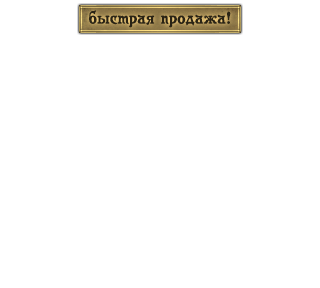
<style>
.page{position:relative;width:320px;height:288px;background:#ffffff}
.page>*{position:absolute;margin:0}
.t1{font:17px "Casanova";letter-spacing:0.01em;color:#2a2415}
</style>
<div class="page">
<p class="t1" style="left:89px;top:10px;width:142px;height:18px">быстрая продажа!</p>
</div>
